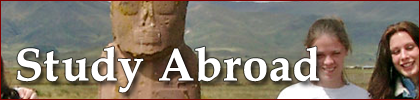
<style>
.page{position:relative;width:420px;height:100px}
.page>*{position:absolute;margin:0}
.t1{font:46.1px "BookAntiqua-Bold";color:#ffffff;font-weight:bold}
</style>
<div class="page">
<p class="t1" style="left:17px;top:46px;width:303px;height:47px">Study Abroad</p>
</div>
